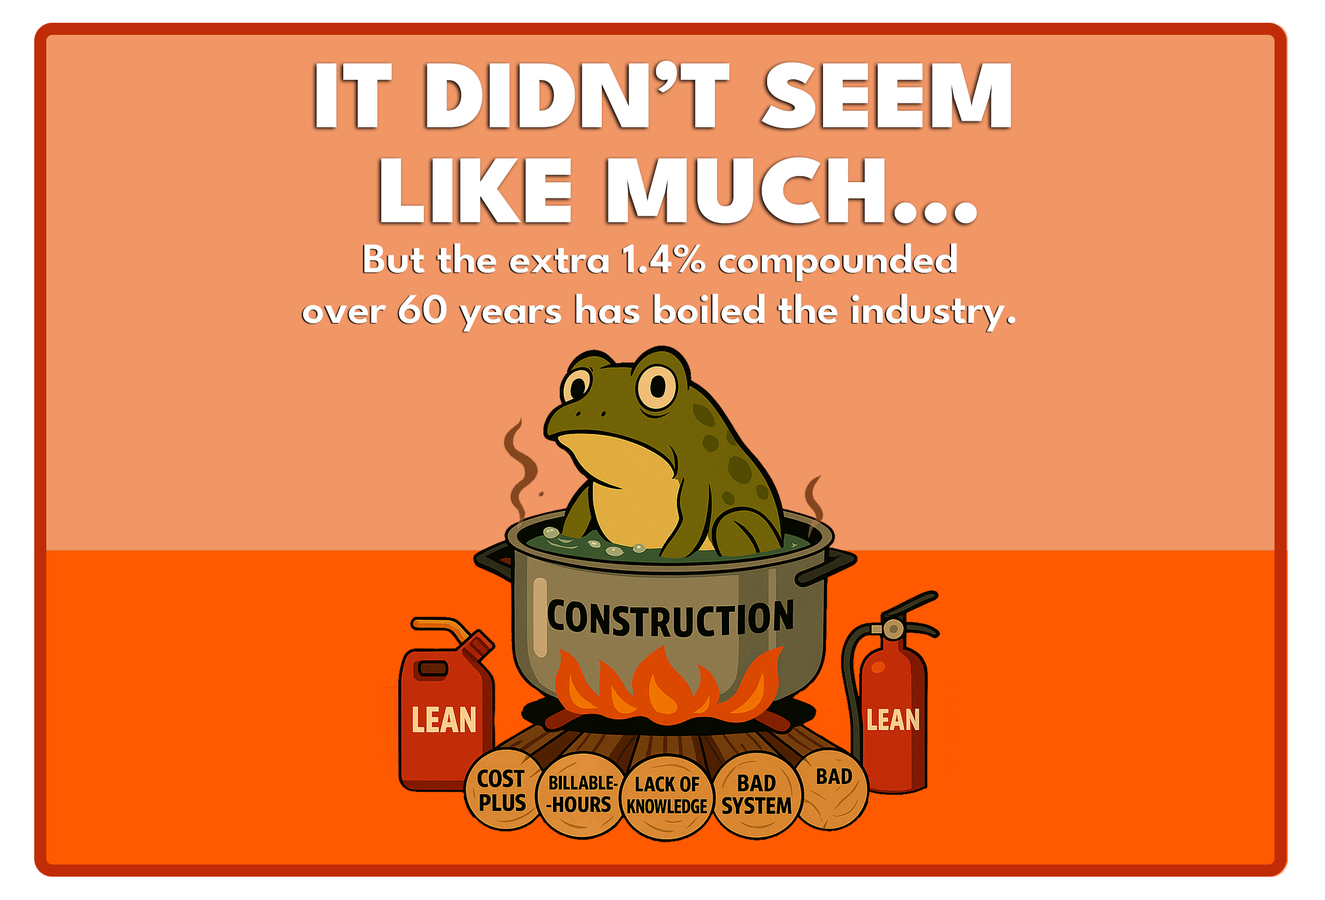
<style>
.page{position:relative;width:1325px;height:900px;background:#f19665}
.page>*{position:absolute;margin:0}
.t1{font:96.2px/95px "LeagueSpartan-Black";color:#ffffff;scale:1.05 1}
.t2{font:42.1px "LeagueSpartan-SemiBold";color:#ffffff;scale:1.05 1}
</style>
<div class="page">
<p class="t1" style="left:316px;top:61px;width:695px;height:163px;text-align:center">IT DIDN’T SEEM <br>LIKE MUCH...</p>
<p class="t2" style="left:303px;top:243px;width:712px;height:89px;text-align:center">But the extra 1.4% compounded<br>over 60 years has boiled the industry.</p>
</div>
